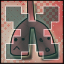
<style>
.page{position:relative;width:64px;height:64px}
.page>*{position:absolute;margin:0}
.t1{font:60px "M50_VANILLA-ICE"}
</style>
<div class="page">
<p class="t1" style="left:6px;top:6px;width:53px;height:53px">x</p>
</div>
